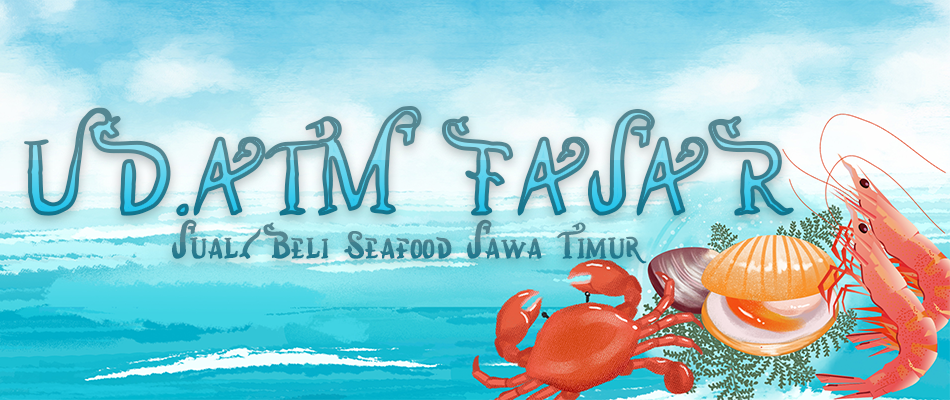
<style>
.page{position:relative;width:950px;height:400px}
.page>*{position:absolute;margin:0}
.t1{font:125px "MarinaSundalandRegular"}
.t2{font:45.8px "MarinaSundalandRegular"}
</style>
<div class="page">
<p class="t1" style="left:24px;top:106px;width:770px;height:110px">UD.ATM FAJAR</p>
<p class="t2" style="left:172px;top:219px;width:475px;height:45px">Jual/Beli Seafood Jawa Timur</p>
</div>
